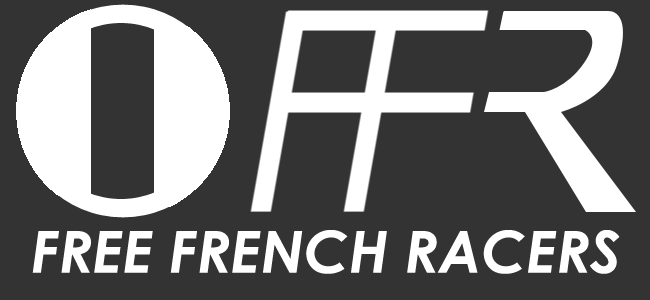
<style>
.page{position:relative;width:650px;height:300px;background:#333333}
.page>*{position:absolute;margin:0}
.t1{font:58px "CenturyGothic-BoldItalic";color:#ffffff}
</style>
<div class="page">
<p class="t1" style="left:32px;top:230px;width:588px;height:44px">FREE FRENCH RACERS</p>
</div>
